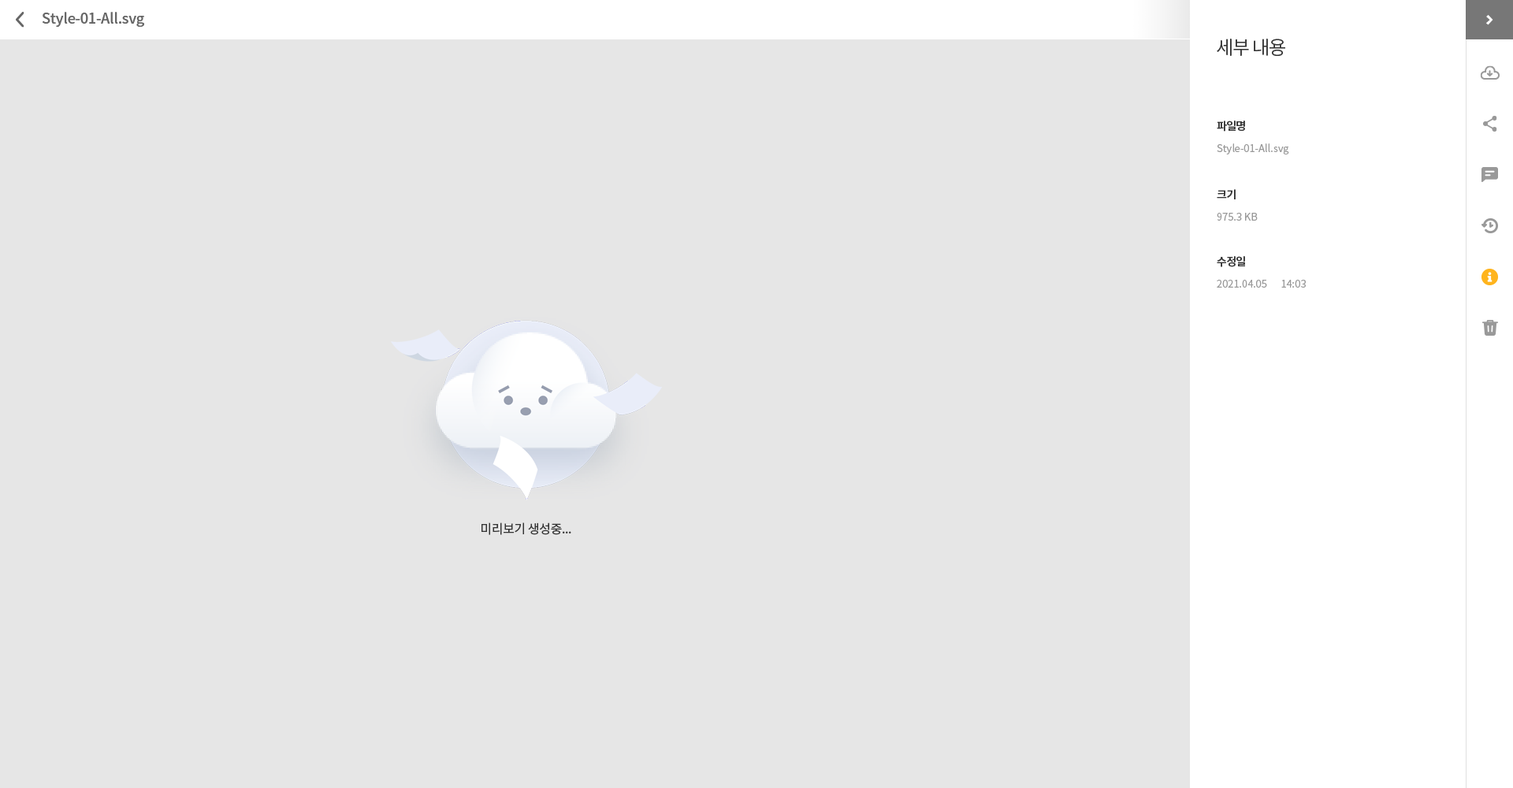
<style>
.page{position:relative;width:1513px;height:788px;background:#e6e6e6}
.page>*{position:absolute;margin:0}
.t1{font:14.2px "NotoSansCJKkr-Medium";letter-spacing:-0.01em;color:#666666}
.t2{font:18.9px "NotoSansCJKkr-DemiLight";letter-spacing:-0.05em;color:#333333}
.t3{font:11px "NotoSansCJKkr-Bold";letter-spacing:-0.05em;color:#333333}
.t4{font:10.2px "NotoSansCJKkr-DemiLight";color:#999999}
.t5{font:12.6px "NotoSansCJKkr-Regular";letter-spacing:-0.025em;color:#333333}
</style>
<div class="page">
<p class="t1" style="left:43px;top:12px;width:101px;height:15px">Style-01-All.svg</p>
<p class="t2" style="left:1217px;top:39px;width:68px;height:17px">세부 내용</p>
<p class="t3" style="left:1217px;top:121px;width:28px;height:11px">파일명</p>
<p class="t4" style="left:1217px;top:143px;width:72px;height:11px">Style-01-All.svg</p>
<p class="t3" style="left:1217px;top:189px;width:19px;height:10px">크기</p>
<p class="t4" style="left:1217px;top:213px;width:41px;height:8px">975.3 KB</p>
<p class="t3" style="left:1217px;top:256px;width:28px;height:11px">수정일</p>
<p class="t4" style="left:1217px;top:280px;width:89px;height:8px">2021.04.05      14:03</p>
<p class="t5" style="left:482px;top:522px;width:89px;height:13px">미리보기 생성중...</p>
</div>
